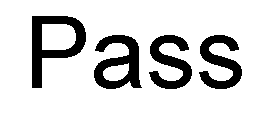
<style>
.page{position:relative;width:265px;height:121px;background:#ffffff}
.page>*{position:absolute;margin:0}
.t1{font:100px "ArialMT";color:#000000}
</style>
<div class="page">
<p class="t1" style="left:32px;top:16px;width:210px;height:73px">Pass</p>
</div>
